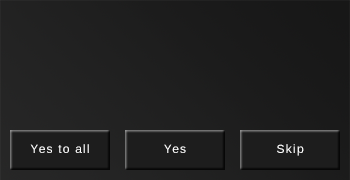
<style>
.page{position:relative;width:350px;height:180px}
.page>*{position:absolute;margin:0}
.t1{font:12px "LiberationSans";letter-spacing:0.1em;color:#ffffff}
</style>
<div class="page">
<p class="t1" style="left:30px;top:144px;width:59px;height:9px">Yes to all</p>
<p class="t1" style="left:164px;top:144px;width:22px;height:9px">Yes</p>
<p class="t1" style="left:277px;top:144px;width:27px;height:12px">Skip</p>
</div>
